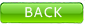
<style>
.page{position:relative;width:85px;height:24px}
.page>*{position:absolute;margin:0}
.t1{font:14px "Cantarell-Regular";color:#fdfdfd}
</style>
<div class="page">
<p class="t1" style="left:25px;top:7px;width:37px;height:11px">BACK</p>
</div>
